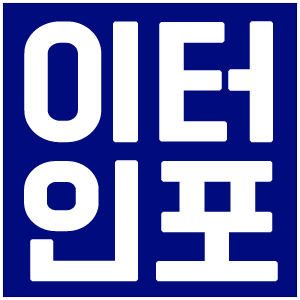
<style>
.page{position:relative;width:300px;height:300px;background:#000c7e}
.page>*{position:absolute;margin:0}
.t1{font:123.5px/139.2px "BMDoHyeon";color:#ffffff;font-weight:bold;scale:1.11 1}
</style>
<div class="page">
<p class="t1" style="left:24px;top:21px;width:254px;height:261px">이터<br>인포</p>
</div>
